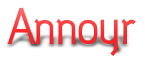
<style>
.page{position:relative;width:145px;height:60px;background:#ffffff}
.page>*{position:absolute;margin:0}
.t1{font:64.4px "Acid-Medium";letter-spacing:-0.025em;color:#ff2123}
</style>
<div class="page">
<p class="t1" style="left:7px;top:8px;width:129px;height:48px">Annoyr</p>
</div>
